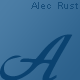
<style>
.page{position:relative;width:80px;height:80px}
.page>*{position:absolute;margin:0}
.t1{font:9px "ArialMT";letter-spacing:0.1em;color:#0a4270}
.t2{font:100px "Today";letter-spacing:-0.01em;color:#0a4270}
</style>
<div class="page">
<p class="t1" style="left:31px;top:2px;width:47px;height:7px;opacity:0.75">Alec Rust</p>
<p class="t2" style="left:0px;top:34px;width:73px;height:48px">A</p>
</div>
